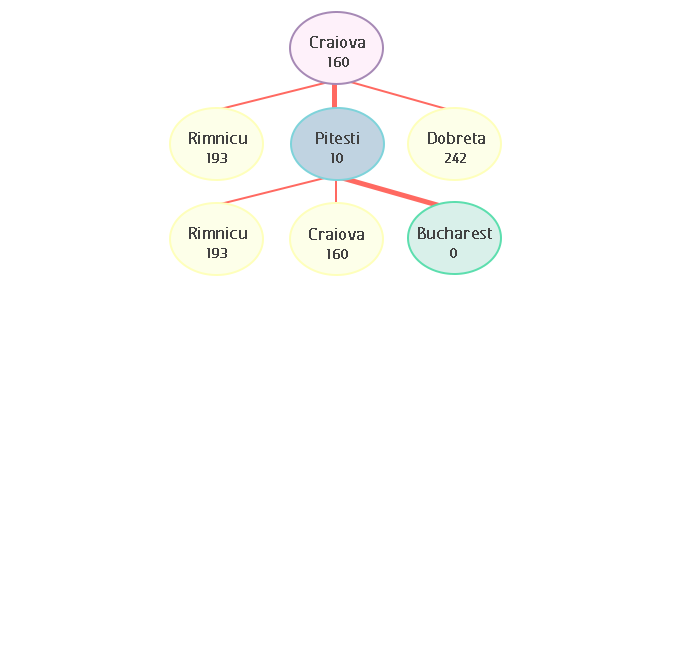
<style>
.page{position:relative;width:674px;height:660px;background:#ffffff}
.page>*{position:absolute;margin:0}
.t1{font:20.8px "FCActiveRegular";color:#424242;font-weight:bold}
.t2{font:16.7px "FCActiveRegular";color:#424141;font-weight:bold}
</style>
<div class="page">
<p class="t1" style="left:310px;top:36px;width:55px;height:12px">Craiova</p>
<p class="t2" style="left:328px;top:57px;width:21px;height:10px">160</p>
<p class="t1" style="left:189px;top:132px;width:58px;height:12px">Rimnicu</p>
<p class="t1" style="left:316px;top:132px;width:43px;height:12px">Pitesti</p>
<p class="t1" style="left:428px;top:132px;width:57px;height:12px">Dobreta</p>
<p class="t2" style="left:207px;top:153px;width:20px;height:10px">193</p>
<p class="t2" style="left:331px;top:153px;width:12px;height:10px">10</p>
<p class="t2" style="left:445px;top:153px;width:21px;height:10px">242</p>
<p class="t1" style="left:189px;top:227px;width:58px;height:12px">Rimnicu</p>
<p class="t1" style="left:309px;top:228px;width:55px;height:12px">Craiova</p>
<p class="t1" style="left:418px;top:227px;width:74px;height:12px">Bucharest</p>
<p class="t2" style="left:207px;top:248px;width:20px;height:10px">193</p>
<p class="t2" style="left:327px;top:249px;width:21px;height:10px">160</p>
<p class="t2" style="left:450px;top:248px;width:7px;height:10px">0</p>
</div>
